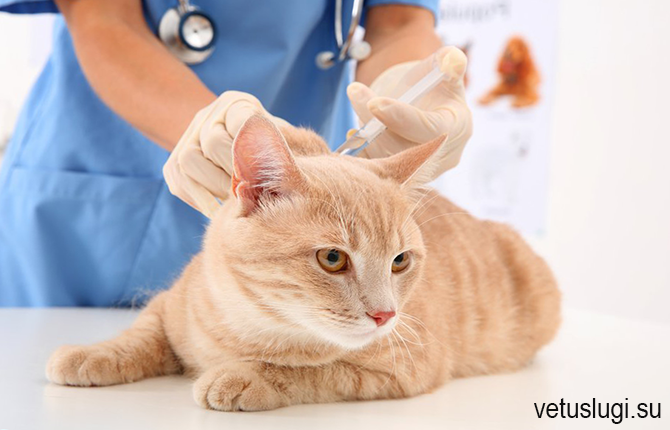
<style>
.page{position:relative;width:670px;height:430px}
.page>*{position:absolute;margin:0}
.t1{font:28.4px "ArialNarrow";letter-spacing:0.002em;color:#0f0e0e;scale:1.04 1}
</style>
<div class="page">
<p class="t1" style="left:534px;top:398px;width:127px;height:26px">vetuslugi.su</p>
</div>
